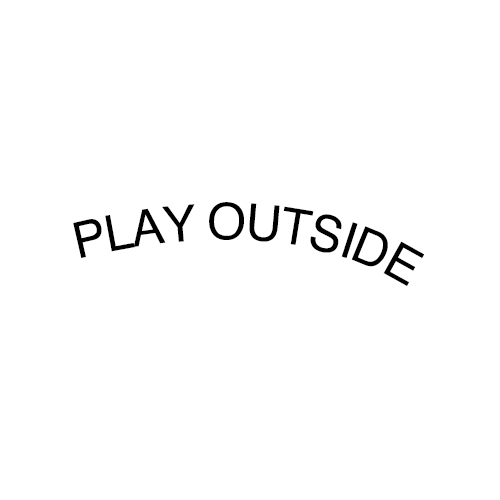
<style>
.page{position:relative;width:500px;height:500px;background:#ffffff}
.page>*{position:absolute;margin:0}
.t1{font:50px "Helvetica";letter-spacing:-0.04em;color:#000000}
</style>
<div class="page">
<p class="t1" style="left:73px;top:202px;width:352px;height:84px;rotate:-6deg">PLAY OUTSIDE</p>
</div>
